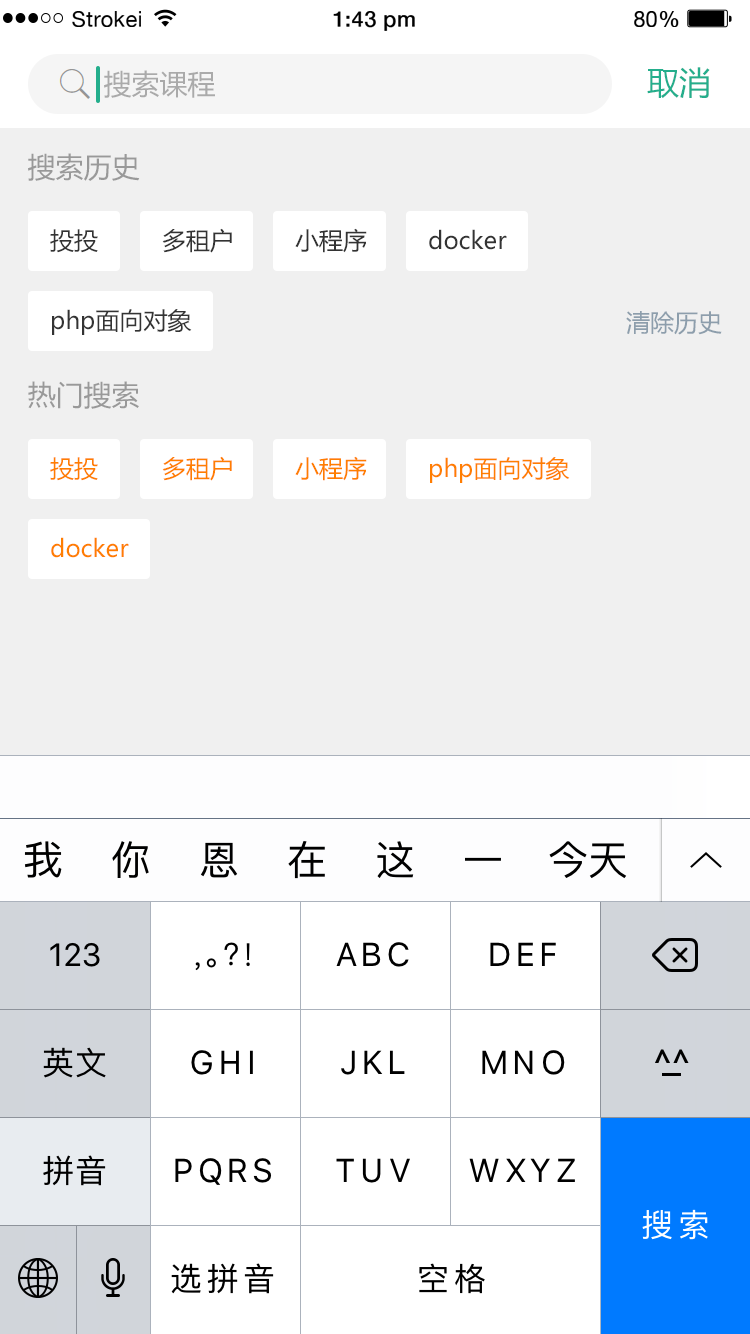
<style>
.page{position:relative;width:750px;height:1334px;background:#f0f0f0}
.page>*{position:absolute;margin:0}
.t1{font:21.8px "HelveticaNeue";letter-spacing:0.02em;color:#000000}
.t2{font:21.8px "HelveticaNeue-Medium";letter-spacing:0.02em;color:#000000}
.t3{font:28px "MicrosoftYaHei";color:#aaaaaa}
.t4{font:32px "MicrosoftYaHei";color:#24ae8c}
.t5{font:28px "MicrosoftYaHei";color:#999999}
.t6{font:24px "MicrosoftYaHei";color:#333333}
.t7{font:24px "MicrosoftYaHei";color:#8d9eac}
.t8{font:24px "MicrosoftYaHei";color:#ff7e00}
</style>
<div class="page">
<p class="t1" style="left:72px;top:11px;width:69px;height:16px">Strokei</p>
<p class="t2" style="left:333px;top:11px;width:82px;height:20px">1:43 pm</p>
<p class="t1" style="left:634px;top:11px;width:45px;height:16px">80<span class="t2">%</span></p>
<p class="t3" style="left:104px;top:70px;width:111px;height:28px">搜索课程</p>
<p class="t4" style="left:647px;top:67px;width:63px;height:31px">取消</p>
<p class="t5" style="left:28px;top:153px;width:112px;height:28px">搜索历史</p>
<p class="t6" style="left:50px;top:229px;width:48px;height:24px">投投</p>
<p class="t6" style="left:162px;top:228px;width:70px;height:25px">多租户</p>
<p class="t6" style="left:295px;top:228px;width:72px;height:25px">小程序</p>
<p class="t6" style="left:429px;top:229px;width:78px;height:21px">docker</p>
<p class="t6" style="left:52px;top:309px;width:140px;height:26px">php面向对象</p>
<p class="t7" style="left:626px;top:311px;width:96px;height:24px">清除历史</p>
<p class="t5" style="left:28px;top:381px;width:111px;height:28px">热门搜索</p>
<p class="t8" style="left:50px;top:457px;width:48px;height:24px">投投</p>
<p class="t8" style="left:162px;top:456px;width:70px;height:25px">多租户</p>
<p class="t8" style="left:295px;top:456px;width:72px;height:25px">小程序</p>
<p class="t8" style="left:430px;top:457px;width:140px;height:26px">php面向对象</p>
<p class="t8" style="left:51px;top:537px;width:78px;height:21px">docker</p>
</div>
